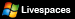
<style>
.page{position:relative;width:75px;height:19px;background:#000000}
.page>*{position:absolute;margin:0}
.t1{font:9px "ArialRoundedMTBold";color:#ffffff}
</style>
<div class="page">
<p class="t1" style="left:21px;top:6px;width:50px;height:9px">Livespaces</p>
</div>
